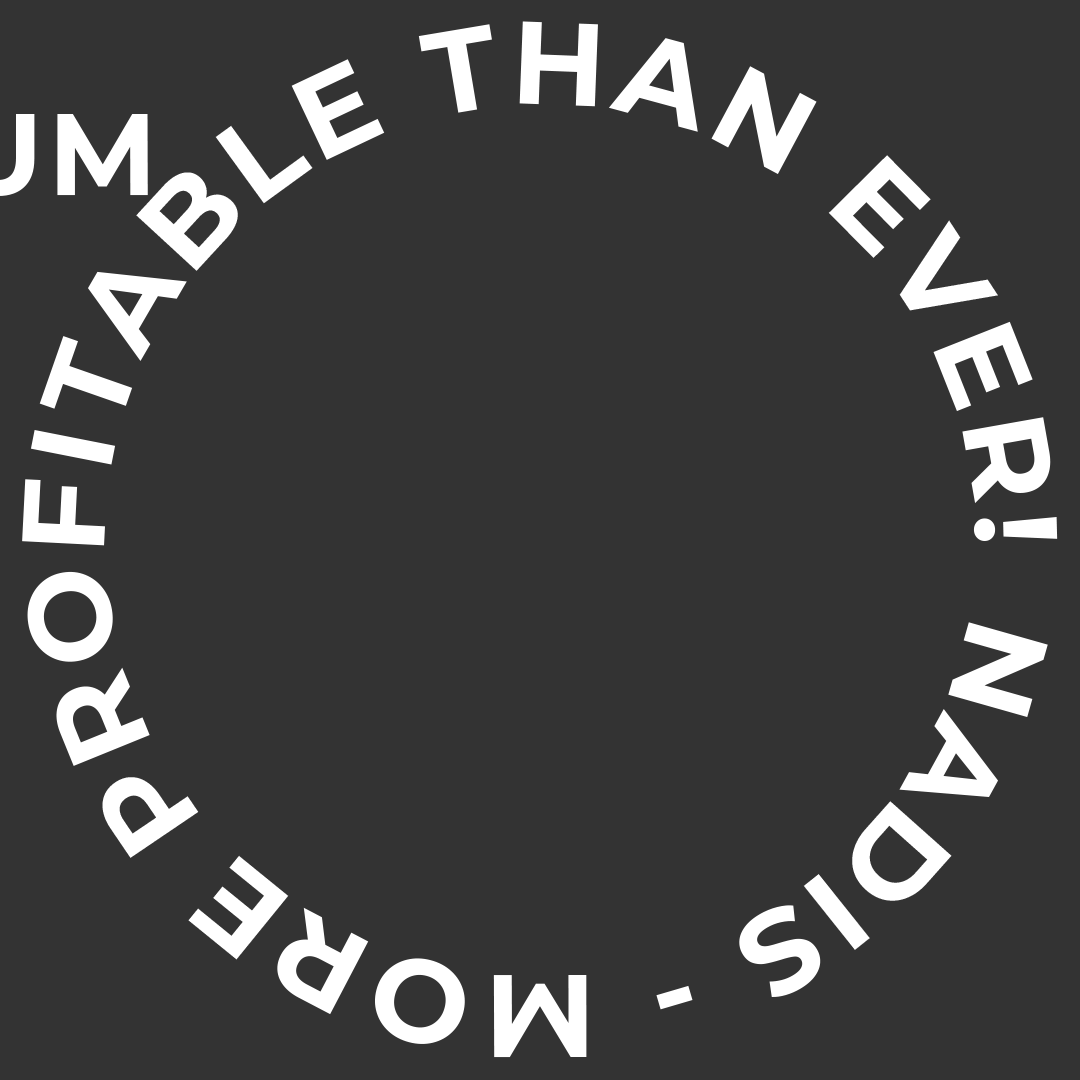
<style>
.page{position:relative;width:1080px;height:1080px;background:#333333}
.page>*{position:absolute;margin:0}
.t1{font:117.1px "Montserrat-Bold";letter-spacing:0.05em;color:#ffffff;text-transform:uppercase}
</style>
<div class="page">
<p class="t1" style="left:22px;top:21px;width:1036px;height:1037px;rotate:-54deg">NADIS - MORE PROFITABLE THAN EVER!</p>
</div>
